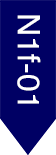
<style>
.page{position:relative;width:56px;height:155px;background:#000064}
.page>*{position:absolute;margin:0}
.t1{font:31px "Helvetica";color:#ffffff;scale:1.04 1}
</style>
<div class="page">
<p class="t1" style="left:17px;top:15px;width:24px;height:89px;rotate:90deg">N1f-01</p>
</div>
